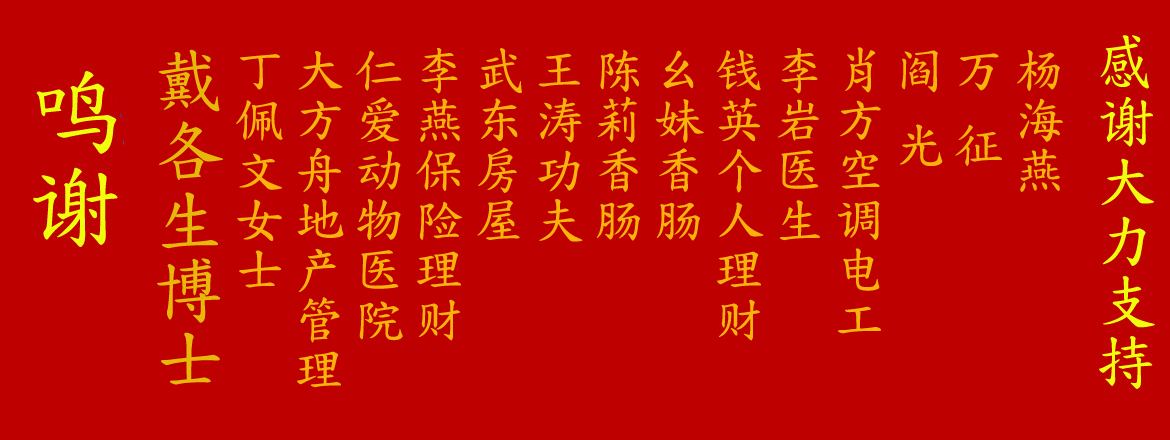
<style>
.page{position:relative;width:1170px;height:440px;background:#be0000}
.page>*{position:absolute;margin:0}
.t1{font:50px "DFKaiShu-SB-Estd-BF";color:#f9b30a}
.t2{font:70px "DFKaiShu-SB-Estd-BF";color:#e8b70b}
</style>
<div class="page">
<p class="t1" style="left:157px;top:47px;width:906px;height:341px">杨海燕<br>万 征<br>阎 光<br>肖方空调电工<br>李岩医生<br>钱英个人理财<br>幺妹香肠<br>陈莉香肠<br>王涛功夫<br>武东房屋<br>李燕保险理财<br>仁爱动物医院<br>大方舟地产管理<br>丁佩文女士<br><span class="t2">戴各生博士</span></p>
</div>
